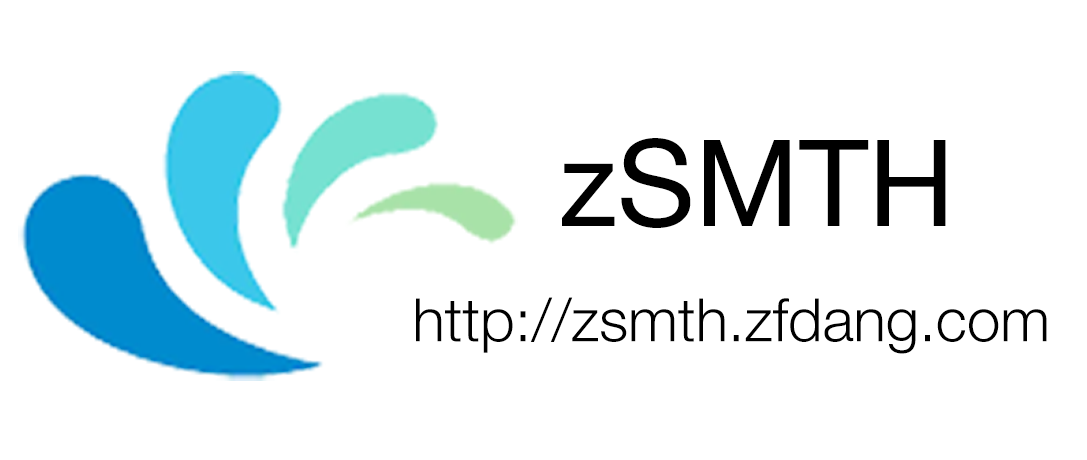
<style>
.page{position:relative;width:1087px;height:460px;background:#ffffff}
.page>*{position:absolute;margin:0}
.t1{font:120px "HelveticaNeue";color:#000000}
.t2{font:60px "HelveticaNeue-Light";color:#000000}
</style>
<div class="page">
<p class="t1" style="left:562px;top:138px;width:384px;height:90px">zSMTH</p>
<p class="t2" style="left:416px;top:297px;width:631px;height:57px">http://zsmth.zfdang.com</p>
</div>
